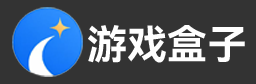
<style>
.page{position:relative;width:256px;height:84px;background:#333333}
.page>*{position:absolute;margin:0}
.t1{font:40.2px "HarmonyOS_Sans_SC_Bold";color:#fefefe}
</style>
<div class="page">
<p class="t1" style="left:88px;top:25px;width:157px;height:38px">游戏盒子</p>
</div>
